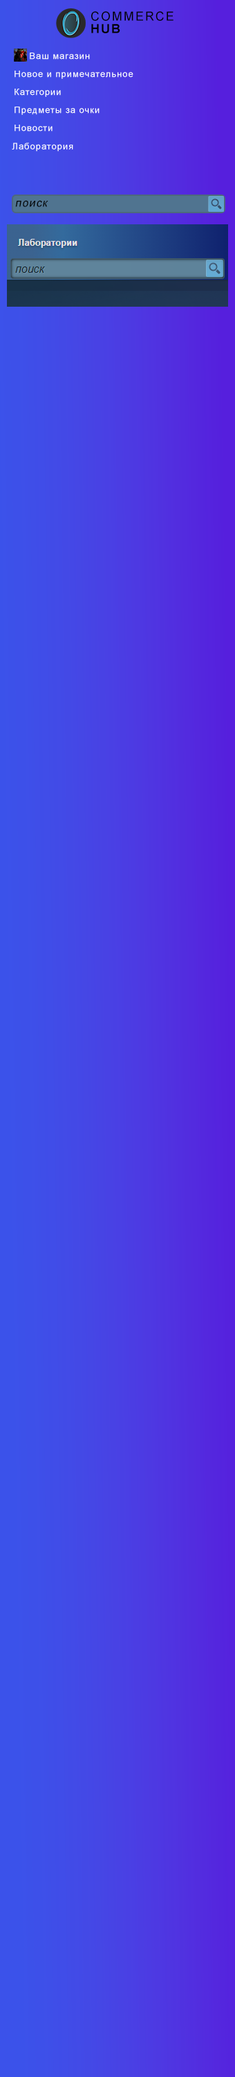
<style>
.page{position:relative;width:235px;height:2077px}
.page>*{position:absolute;margin:0}
.t1{font:12.5px/12.5px "ArialMT";letter-spacing:0.075em;color:#000000;text-transform:uppercase}
.t2{font:12.5px/12.5px "Arial-BoldMT";letter-spacing:0.075em;color:#000000;text-transform:uppercase}
.t3{font:9px "ArialMT";letter-spacing:0.075em;color:#ffffff}
.t4{font:11.1px "ArialMT";letter-spacing:0.075em;color:#000000;font-style:italic}
</style>
<div class="page">
<p class="t1" style="left:91px;top:11px;width:83px;height:22px">Commerce<br><span class="t2">Hub</span></p>
<p class="t3" style="left:30px;top:53px;width:60px;height:7px">Ваш магазин</p>
<p class="t3" style="left:15px;top:71px;width:119px;height:8px">Новое и примечательное</p>
<p class="t3" style="left:15px;top:89px;width:46px;height:8px">Категории</p>
<p class="t3" style="left:15px;top:107px;width:85px;height:8px">Предметы за очки</p>
<p class="t3" style="left:15px;top:125px;width:38px;height:7px">Новости</p>
<p class="t3" style="left:12px;top:143px;width:61px;height:9px">Лаборатория</p>
<p class="t4" style="left:15px;top:200px;width:33px;height:7px">поиск</p>
</div>
